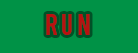
<style>
.page{position:relative;width:138px;height:53px;background:#009246}
.page>*{position:absolute;margin:0}
.t1{font:30px "Bebas-Regular";letter-spacing:0.1em;color:#b91111}
</style>
<div class="page">
<p class="t1" style="left:46px;top:14px;width:44px;height:21px">RUN</p>
</div>
